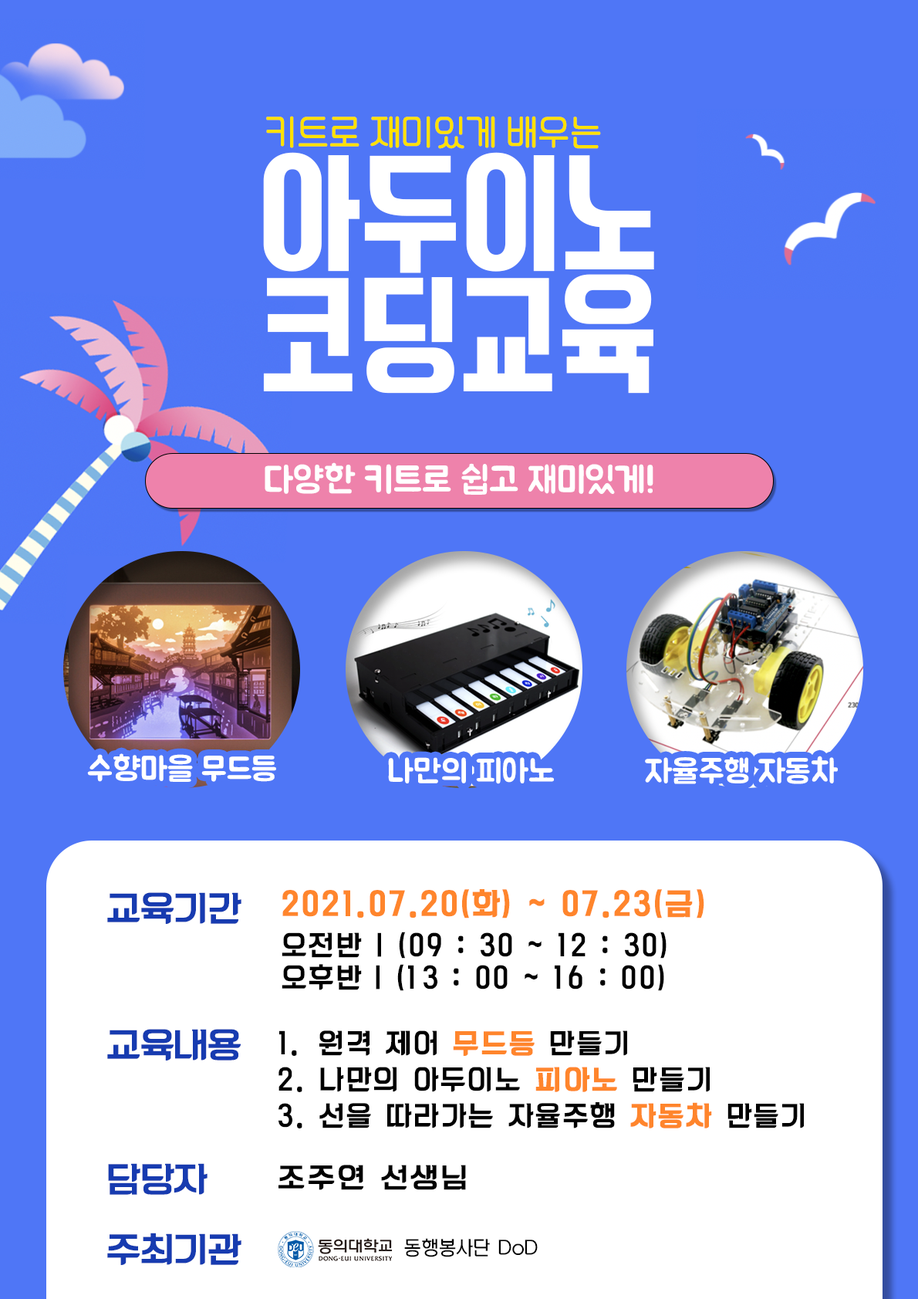
<style>
.page{position:relative;width:918px;height:1299px;background:#4f76f6}
.page>*{position:absolute;margin:0}
.t1{font:35.7px "TTBameuihaebyunR";color:#ffe100;scale:0.93 1}
.t2{font:127px/121.9px "KoreanUJSN-R";color:#ffffff}
.t3{font:36.3px "BMJUA";color:#ffffff}
.t4{font:32.3px "BMJUA";color:#ffffff}
.t5{font:33.7px "KoreanBLACK-M";color:#173bb0}
.t6{font:27.1px/32.3px "KoreanBLACK-M";letter-spacing:0.1em;color:#000000;scale:0.92 1}
.t7{font:29.6px/43.3px "KoreanBLACK-M";letter-spacing:0.1em;color:#ff852c;font-weight:bold;scale:0.92 1}
.t8{font:27.1px/36.3px "KoreanBLACK-M";letter-spacing:0.1em;color:#000000;scale:0.92 1}
.t9{font:27.1px/36.3px "KoreanBLACK-M";letter-spacing:0.1em;color:#ff852c;font-weight:bold;scale:0.92 1}
.t10{font:27.1px "KoreanBLACK-M";letter-spacing:0.1em;color:#000000}
.t11{font:19.6px "KoreanHJJ-M";color:#000000}
</style>
<div class="page">
<p class="t1" style="left:266px;top:116px;width:335px;height:33px">키트로 재미있게 배우는</p>
<p class="t2" style="left:263px;top:152px;width:391px;height:242px;text-align:center">아두이노<br>코딩교육</p>
<p class="t3" style="left:265px;top:462px;width:389px;height:33px">다양한 키트로 쉽고 재미있게!</p>
<p class="t4" style="left:87px;top:753px;width:189px;height:29px">수향마을 무드등</p>
<p class="t4" style="left:388px;top:757px;width:166px;height:27px">나만의 피아노</p>
<p class="t4" style="left:645px;top:755px;width:193px;height:29px">자율주행 자동차</p>
<p class="t5" style="left:107px;top:892px;width:135px;height:32px">교육기간</p>
<p class="t6" style="left:282px;top:889px;width:422px;height:102px"><span class="t7">2021.07.20(화) ~ 07.23(금)<br></span>오전반 | (09 : 30 ~ 12 : 30)<br>오후반 | (13 : 00 ~ 16 : 00)</p>
<p class="t5" style="left:107px;top:1029px;width:134px;height:31px">교육내용</p>
<p class="t8" style="left:279px;top:1030px;width:525px;height:98px">1. 원격 제어 <span class="t9">무드등</span> 만들기<br>2. 나만의 아두이노 <span class="t9">피아노</span> 만들기<br>3. 선을 따라가는 자율주행 <span class="t9">자동차</span> 만들기</p>
<p class="t5" style="left:108px;top:1163px;width:100px;height:31px">담당자</p>
<p class="t10" style="left:279px;top:1164px;width:187px;height:26px">조주연 선생님</p>
<p class="t5" style="left:107px;top:1232px;width:135px;height:33px">주최기관</p>
<p class="t11" style="left:404px;top:1238px;width:134px;height:19px">동행봉사단 DoD</p>
</div>
